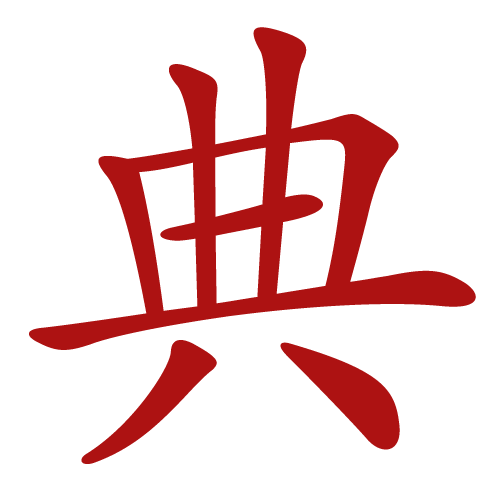
<style>
.page{position:relative;width:500px;height:500px;background:#ffffff}
.page>*{position:absolute;margin:0}
.t1{font:500px "AdobeKaitiStd-Regular";color:#ad1212}
</style>
<div class="page">
<p class="t1" style="left:29px;top:27px;width:447px;height:437px">典</p>
</div>
